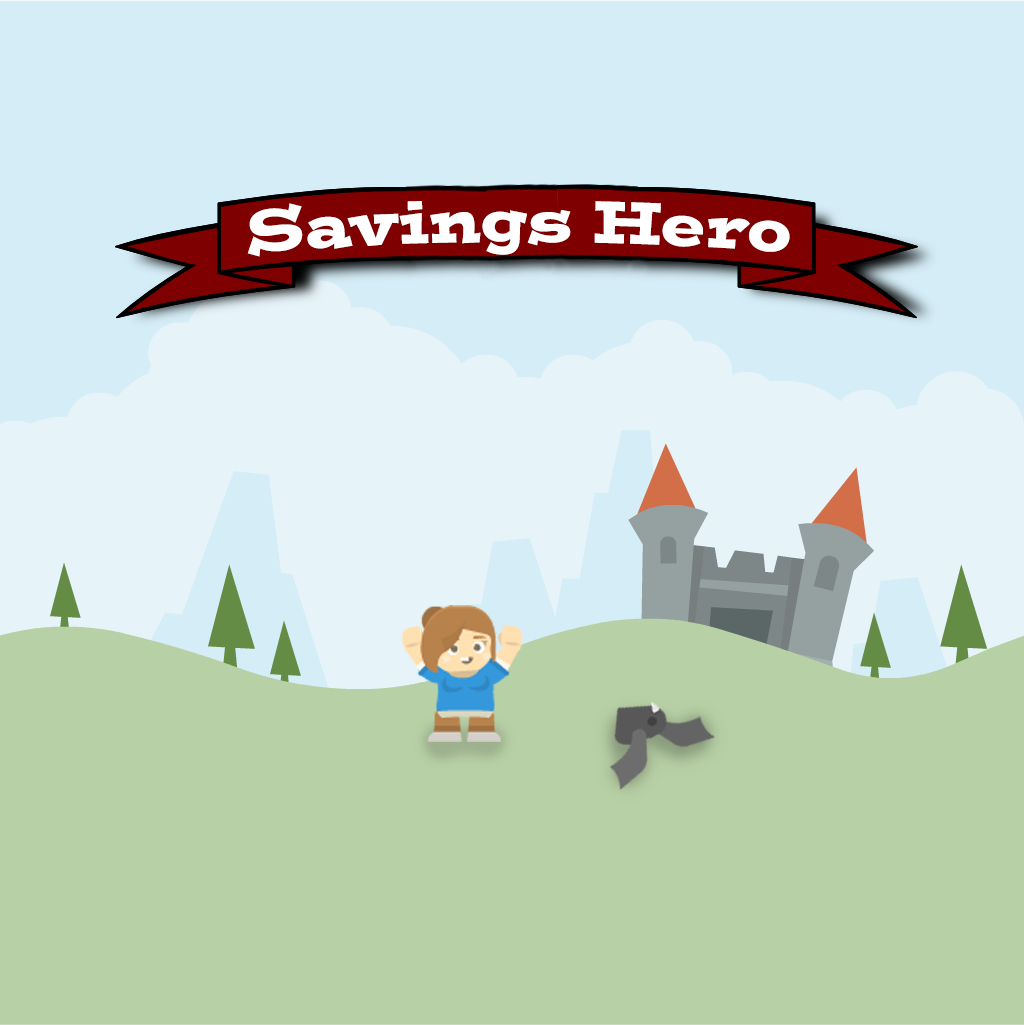
<style>
.page{position:relative;width:1024px;height:1025px;background:#b8d0a6}
.page>*{position:absolute;margin:0}
.t1{font:60px "PostinoStd";color:#ffffff}
</style>
<div class="page">
<p class="t1" style="left:247px;top:201px;width:543px;height:56px">Savings Hero</p>
</div>
